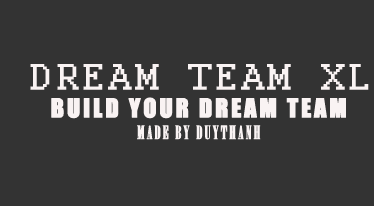
<style>
.page{position:relative;width:374px;height:206px;background:#333333}
.page>*{position:absolute;margin:0}
.t1{font:24px "Impact";letter-spacing:0.1em;color:#f9f3f3;font-weight:bold}
.t2{font:40px "Courier";letter-spacing:0.1em;color:#f9f3f3;font-weight:bold}
.t3{font:18px "Onyx";letter-spacing:0.1em;color:#f9f3f3;font-weight:bold}
</style>
<div class="page">
<p class="t1" style="left:30px;top:64px;width:339px;height:76px;text-align:center"><span class="t2">DREAM TEAM XL<br></span>BUILD YOUR DREAM TEAM<br><span class="t3">MADE BY DUYTHANH</span></p>
</div>
